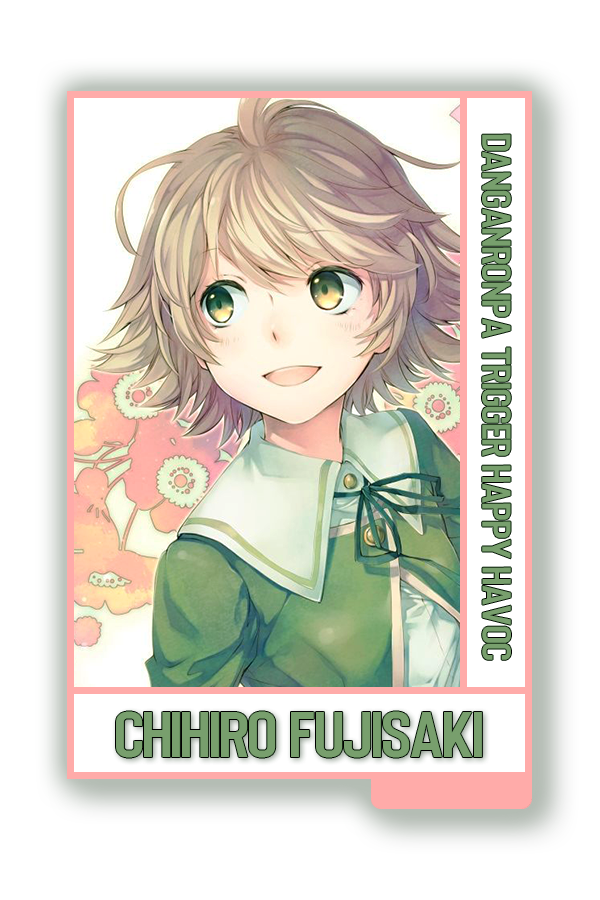
<style>
.page{position:relative;width:600px;height:900px;background:#ffffff}
.page>*{position:absolute;margin:0}
.t1{font:43.6px "Bartenique";color:#839d7a}
.t2{font:70.4px "Bartenique";color:#839d7a}
</style>
<div class="page">
<p class="t1" style="left:482px;top:134px;width:29px;height:526px;rotate:90deg">DANGANRONPA TRIGGER HAPPY HAVOC</p>
<p class="t2" style="left:116px;top:711px;width:366px;height:47px">CHIHIRO FUJISAKI</p>
</div>
